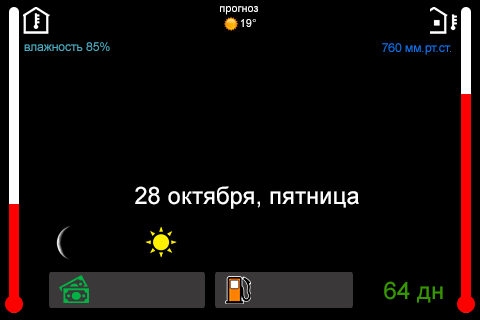
<style>
.page{position:relative;width:480px;height:320px;background:#000000}
.page>*{position:absolute;margin:0}
.t1{font:11px "ArialMT";color:#ffffff}
.t2{font:12px "ArialMT";color:#4fadc1}
.t3{font:12px "ArialMT";color:#1372e4}
.t4{font:24px "ArialMT";color:#ffffff}
.t5{font:24px "ArialMT";color:#389500}
</style>
<div class="page">
<p class="t1" style="left:220px;top:6px;width:38px;height:9px">прогноз</p>
<p class="t1" style="left:241px;top:19px;width:15px;height:8px">19°</p>
<p class="t2" style="left:24px;top:42px;width:86px;height:9px">влажность 85%</p>
<p class="t3" style="left:382px;top:43px;width:69px;height:12px">760 мм.рт.ст.</p>
<p class="t4" style="left:135px;top:186px;width:224px;height:23px">28 октября, пятница</p>
<p class="t5" style="left:384px;top:281px;width:59px;height:22px">64 дн</p>
</div>
